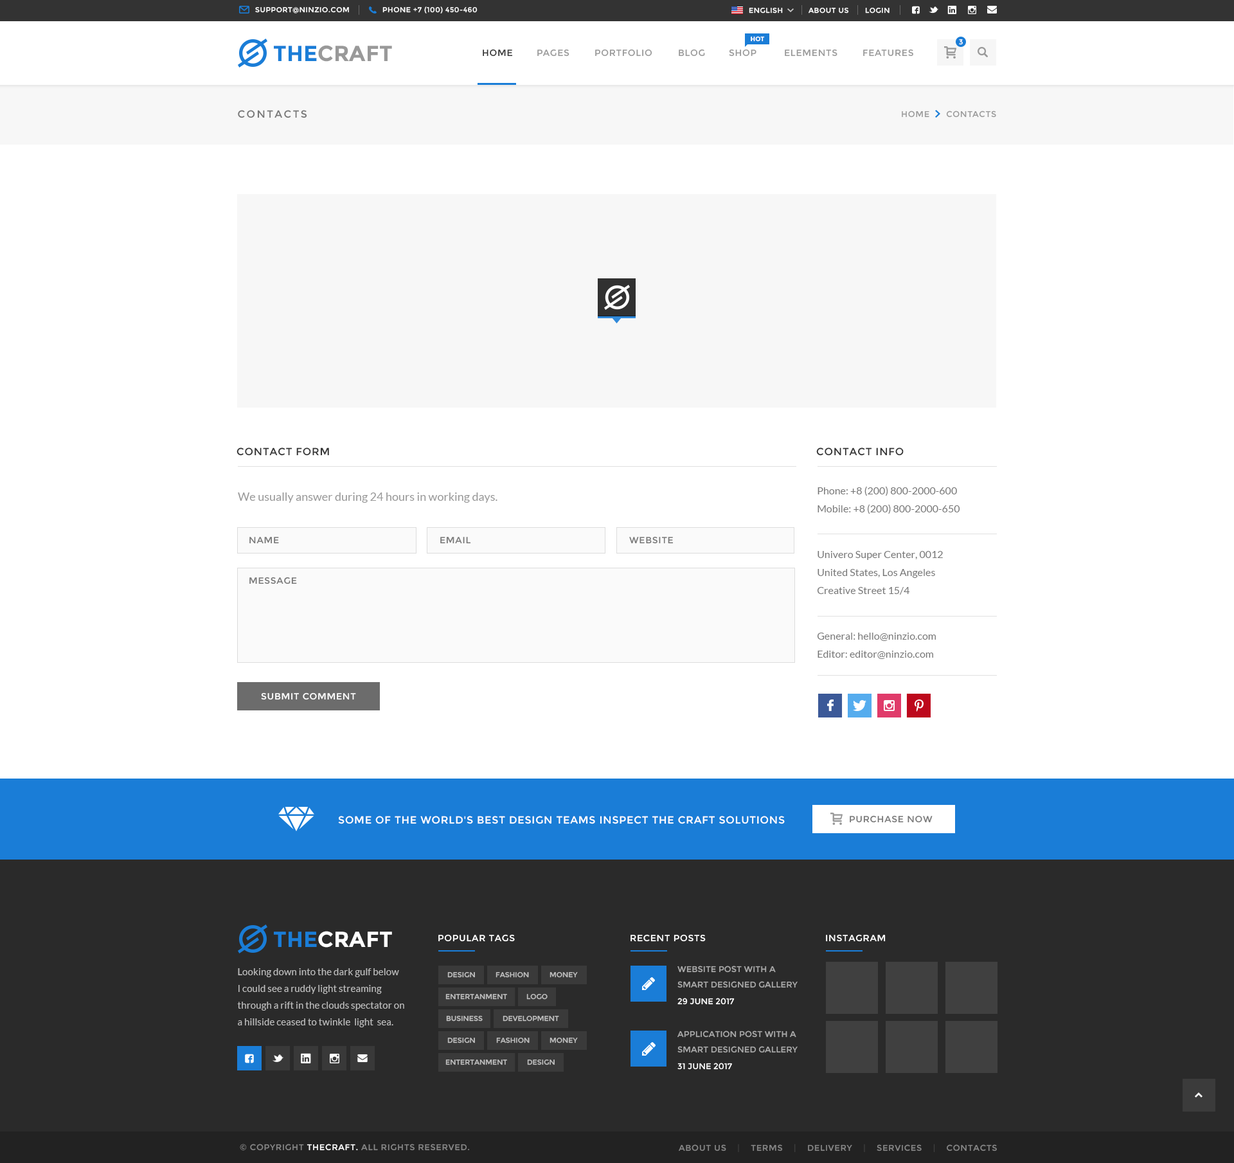
<style>
.page{position:relative;width:1234px;height:1163px;background:#ffffff}
.page>*{position:absolute;margin:0}
.t1{font:7.1px "Montserrat-Regular";letter-spacing:0.05em;color:#ffffff;text-transform:uppercase}
.t2{font:6.4px "Montserrat-Bold";color:#ffffff;text-transform:uppercase}
.t3{font:21.9px "Montserrat-Bold";color:#999999;text-transform:uppercase}
.t4{font:21.9px "Montserrat-Bold";color:#1a7dd7;text-transform:uppercase}
.t5{font:9px "Montserrat-Regular";letter-spacing:0.05em;color:#333333;text-transform:uppercase}
.t6{font:9px "Montserrat-Regular";letter-spacing:0.05em;color:#999999;text-transform:uppercase}
.t7{font:10.3px "Montserrat-Regular";letter-spacing:0.15em;color:#777777;text-transform:uppercase}
.t8{font:8.4px "Montserrat-Regular";letter-spacing:0.05em;color:#999999;text-transform:uppercase}
.t9{font:10.3px "Montserrat-Regular";letter-spacing:0.05em;color:#333333;text-transform:uppercase}
.t10{font:11.6px "Lato-Regular";color:#999999}
.t11{font:10.3px/18px "Lato-Regular";color:#777777}
.t12{font:9px "Montserrat-Regular";letter-spacing:0.05em;color:#777777;text-transform:uppercase}
.t13{font:9px "Montserrat-Regular";letter-spacing:0.05em;color:#ffffff;text-transform:uppercase}
.t14{font:10.3px "Montserrat-Regular";letter-spacing:0.05em;color:#ffffff;text-transform:uppercase}
.t15{font:21.9px "Montserrat-Bold";color:#ffffff;text-transform:uppercase}
.t16{font:8.4px/15.4px "Montserrat-Regular";color:#ababab;text-transform:uppercase}
.t17{font:9.6px/16.7px "Lato-Regular";color:#bdbdbd}
.t18{font:7.1px "Montserrat-Regular";color:#c0c0c0;text-transform:uppercase}
.t19{font:8.4px "Montserrat-Regular";color:#ffffff;text-transform:uppercase}
.t20{font:7.1px "Montserrat-Regular";color:#c1c1c1;text-transform:uppercase}
.t21{font:8.4px "Montserrat-Regular";letter-spacing:0.05em;color:#878787;text-transform:uppercase}
.t22{font:8.4px "Montserrat-Regular";letter-spacing:0.05em;color:#ffffff;text-transform:uppercase}
.t23{font:8.4px "Montserrat-Regular";letter-spacing:0.05em;color:#404040;text-transform:uppercase}
.t24{font:8.4px "Montserrat-Regular";letter-spacing:0.05em;color:#414141;text-transform:uppercase}
</style>
<div class="page">
<p class="t1" style="left:255px;top:7px;width:94px;height:7px">support@ninzio.com</p>
<p class="t1" style="left:382px;top:6px;width:96px;height:8px">phone +7 (100) 450-460</p>
<p class="t1" style="left:749px;top:8px;width:141px;height:6px">English           About Us       Login</p>
<p class="t2" style="left:751px;top:36px;width:14px;height:6px">Hot</p>
<p class="t1" style="left:959px;top:39px;width:4px;height:6px">3</p>
<p class="t3" style="left:274px;top:45px;width:118px;height:17px"><span class="t4">The</span>Craft</p>
<p class="t5" style="left:483px;top:49px;width:30px;height:8px">Home</p>
<p class="t6" style="left:537px;top:49px;width:33px;height:8px">Pages</p>
<p class="t6" style="left:595px;top:49px;width:57px;height:8px">Portfolio</p>
<p class="t6" style="left:679px;top:49px;width:26px;height:8px">Blog</p>
<p class="t6" style="left:729px;top:49px;width:28px;height:8px">Shop</p>
<p class="t6" style="left:785px;top:49px;width:53px;height:8px">Elements</p>
<p class="t6" style="left:863px;top:49px;width:51px;height:8px">Features</p>
<p class="t7" style="left:238px;top:110px;width:69px;height:8px">Contacts</p>
<p class="t8" style="left:902px;top:111px;width:94px;height:7px">Home      Contacts</p>
<p class="t9" style="left:237px;top:447px;width:92px;height:9px">Contact Form</p>
<p class="t9" style="left:816px;top:447px;width:88px;height:9px">Contact INfo</p>
<p class="t10" style="left:238px;top:492px;width:260px;height:11px">We usually answer during 24 hours in working days.</p>
<p class="t11" style="left:818px;top:486px;width:142px;height:28px">Phone: +8 (200) 800-2000-600<br>Mobile: +8 (200) 800-2000-650</p>
<p class="t12" style="left:249px;top:537px;width:30px;height:7px">Name</p>
<p class="t12" style="left:440px;top:537px;width:31px;height:7px">Email</p>
<p class="t12" style="left:629px;top:536px;width:45px;height:8px">Website</p>
<p class="t11" style="left:817px;top:551px;width:126px;height:44px">Univero Super Center, 0012<br>United States, Los Angeles<br>Creative Street 15/4</p>
<p class="t12" style="left:249px;top:577px;width:48px;height:7px">Message</p>
<p class="t11" style="left:817px;top:633px;width:119px;height:26px">General: hello@ninzio.com<br>Editor: editor@ninzio.com</p>
<p class="t13" style="left:261px;top:692px;width:95px;height:8px">Submit Comment</p>
<p class="t14" style="left:338px;top:816px;width:447px;height:8px">Some of the world's best design teams inspect The Craft solutions</p>
<p class="t12" style="left:850px;top:815px;width:83px;height:8px">Purchase now</p>
<p class="t15" style="left:274px;top:931px;width:118px;height:17px"><span class="t4">The</span>Craft</p>
<p class="t13" style="left:438px;top:934px;width:77px;height:8px">Popular tags</p>
<p class="t13" style="left:631px;top:934px;width:75px;height:8px">Recent Posts</p>
<p class="t13" style="left:826px;top:934px;width:60px;height:8px">Instagram</p>
<p class="t16" style="left:678px;top:966px;width:120px;height:22px">Website Post with A Smart Designed Gallery Post</p>
<p class="t17" style="left:237px;top:968px;width:167px;height:59px">Looking down into the dark gulf below I could see a ruddy light streaming through a rift in the clouds spectator on a hillside ceased to twinkle  light  sea.</p>
<p class="t18" style="left:447px;top:972px;width:28px;height:6px">Design</p>
<p class="t18" style="left:496px;top:972px;width:33px;height:6px">Fashion</p>
<p class="t18" style="left:550px;top:972px;width:28px;height:6px">Money</p>
<p class="t18" style="left:446px;top:994px;width:61px;height:6px">Entertanment</p>
<p class="t18" style="left:526px;top:994px;width:22px;height:6px">Logo</p>
<p class="t19" style="left:678px;top:998px;width:57px;height:7px">29 June 2017</p>
<p class="t20" style="left:446px;top:1016px;width:37px;height:6px">Business</p>
<p class="t18" style="left:503px;top:1016px;width:56px;height:6px">Development</p>
<p class="t18" style="left:447px;top:1038px;width:28px;height:5px">Design</p>
<p class="t18" style="left:496px;top:1038px;width:34px;height:5px">Fashion</p>
<p class="t18" style="left:550px;top:1038px;width:28px;height:5px">Money</p>
<p class="t16" style="left:678px;top:1030px;width:120px;height:23px">Application Post with A Smart Designed Gallery Post</p>
<p class="t18" style="left:446px;top:1059px;width:61px;height:6px">Entertanment</p>
<p class="t18" style="left:527px;top:1059px;width:28px;height:6px">Design</p>
<p class="t19" style="left:678px;top:1063px;width:54px;height:7px">31 June 2017</p>
<p class="t21" style="left:240px;top:1144px;width:229px;height:7px">© Copyright <span class="t22">TheCraft. </span>All rights reserved.</p>
<p class="t21" style="left:679px;top:1144px;width:318px;height:9px">About Us   <span class="t23"> |</span>    Terms    <span class="t24">|</span>    Delivery    <span class="t24">|</span>    Services    <span class="t24">|</span>    Contacts</p>
</div>
